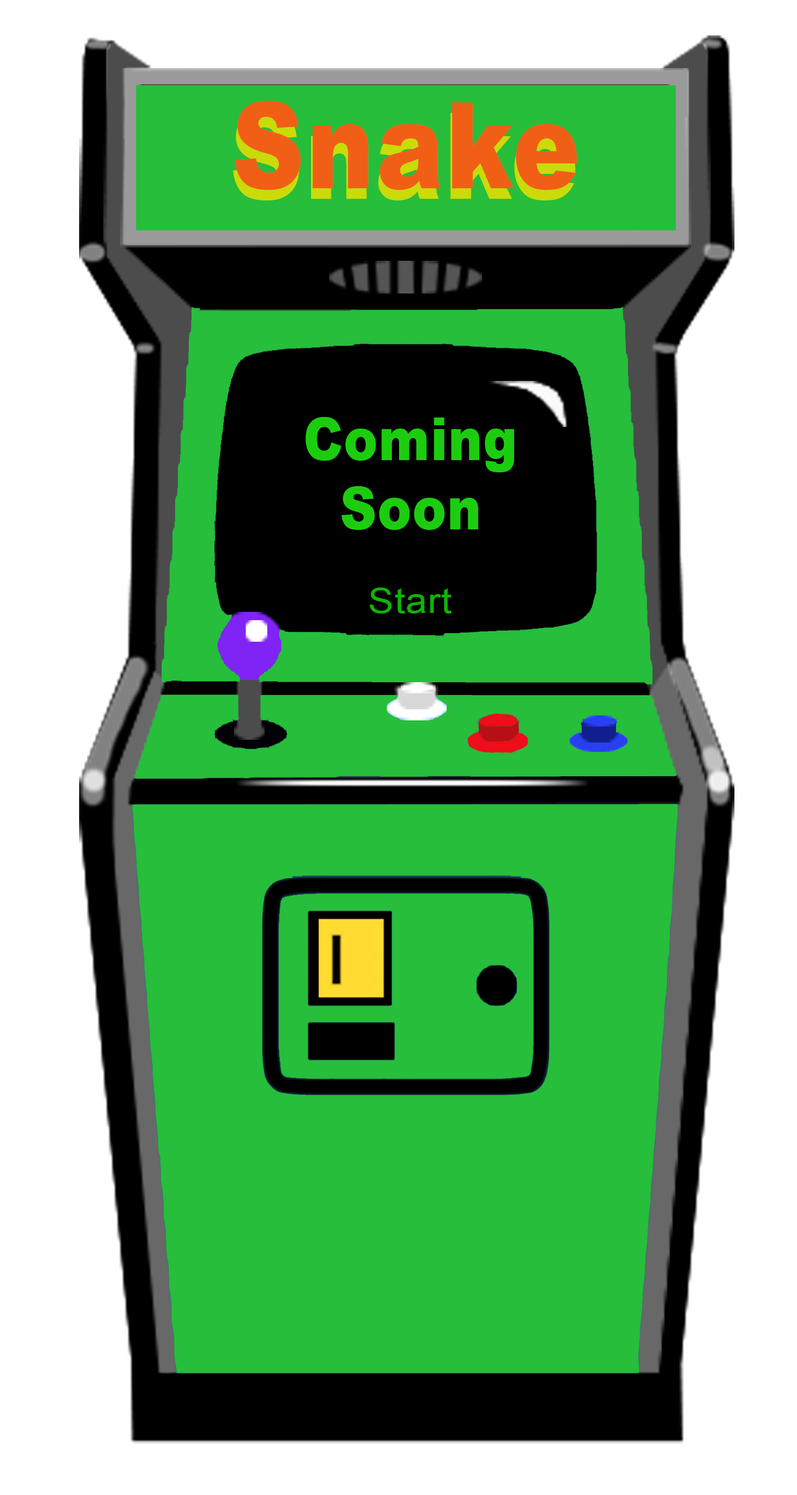
<style>
.page{position:relative;width:797px;height:1495px;background:#26be3b}
.page>*{position:absolute;margin:0}
.t1{font:120px "Arial-Black";letter-spacing:0.02em;color:#f15f17;scale:0.85 1}
.t2{font:60px/23.1px "Arial-Black";letter-spacing:0.02em;color:#1ccd0f;scale:0.85 1}
.t3{font:34.6px "ArialMT";letter-spacing:0.02em;color:#10b404;scale:1.1 1}
</style>
<div class="page">
<p class="t1" style="left:235px;top:101px;width:343px;height:89px">Snake</p>
<p class="t2" style="left:306px;top:417px;width:208px;height:113px;text-align:center">Coming <br><br><br>Soon</p>
<p class="t3" style="left:370px;top:588px;width:82px;height:26px">Start</p>
</div>
